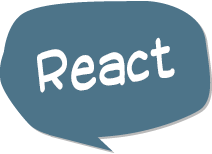
<style>
.page{position:relative;width:212px;height:154px;background:#4d7489}
.page>*{position:absolute;margin:0}
.t1{font:60px "SuplexmentaryComicNC";color:#ffffff;scale:0.8 1}
</style>
<div class="page">
<p class="t1" style="left:37px;top:37px;width:138px;height:56px;rotate:-6deg">React</p>
</div>
